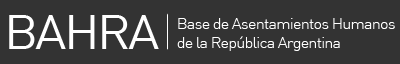
<style>
.page{position:relative;width:400px;height:64px;background:#333333}
.page>*{position:absolute;margin:0}
.t1{font:15.3px "DIN-Light";letter-spacing:-0.05em;color:#ffffff;scale:1.06 1}
</style>
<div class="page">
<p class="t1" style="left:177px;top:18px;width:218px;height:33px">Base de Asentamientos Humanos<br>de la República Argentina</p>
</div>
